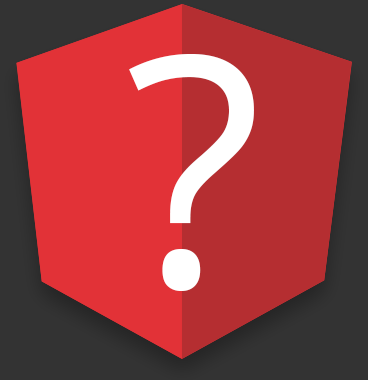
<style>
.page{position:relative;width:368px;height:380px;background:#e23237}
.page>*{position:absolute;margin:0}
.t1{font:320px "OpenSans";color:#ffffff}
</style>
<div class="page">
<p class="t1" style="left:129px;top:54px;width:125px;height:237px">?</p>
</div>
